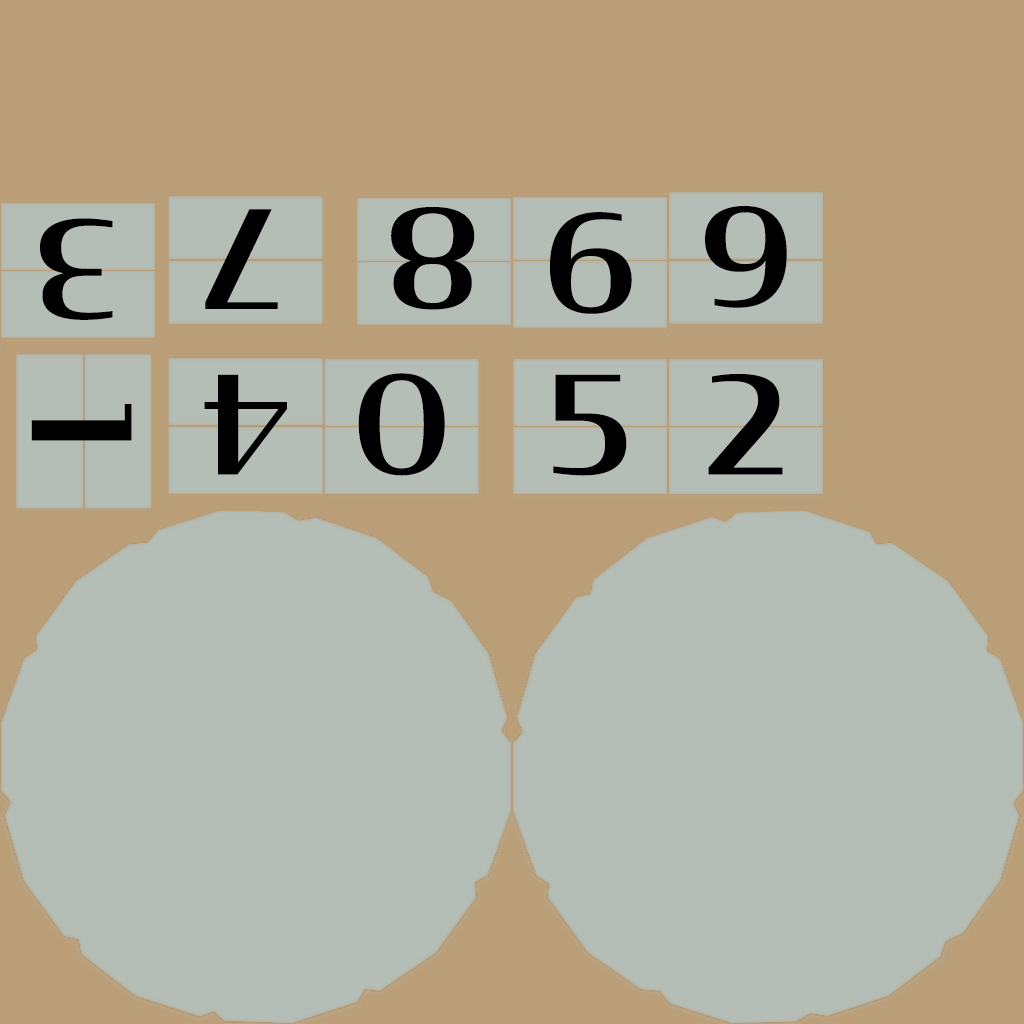
<style>
.page{position:relative;width:1024px;height:1024px;background:#b4bdb6}
.page>*{position:absolute;margin:0}
.t1{font:135px "Condor-Medium";color:#000000}
</style>
<div class="page">
<p class="t1" style="left:205px;top:209px;width:73px;height:100px;rotate:180deg">7</p>
<p class="t1" style="left:391px;top:207px;width:84px;height:103px;rotate:180deg">8</p>
<p class="t1" style="left:705px;top:206px;width:82px;height:102px">9</p>
<p class="t1" style="left:40px;top:218px;width:73px;height:102px;rotate:180deg">3</p>
<p class="t1" style="left:549px;top:212px;width:83px;height:102px">6</p>
<p class="t1" style="left:204px;top:374px;width:83px;height:101px;rotate:180deg">4</p>
<p class="t1" style="left:358px;top:373px;width:87px;height:103px;rotate:180deg">0</p>
<p class="t1" style="left:553px;top:374px;width:74px;height:102px">5</p>
<p class="t1" style="left:708px;top:374px;width:75px;height:101px">2</p>
<p class="t1" style="left:31px;top:404px;width:101px;height:37px;rotate:90deg">1</p>
</div>
